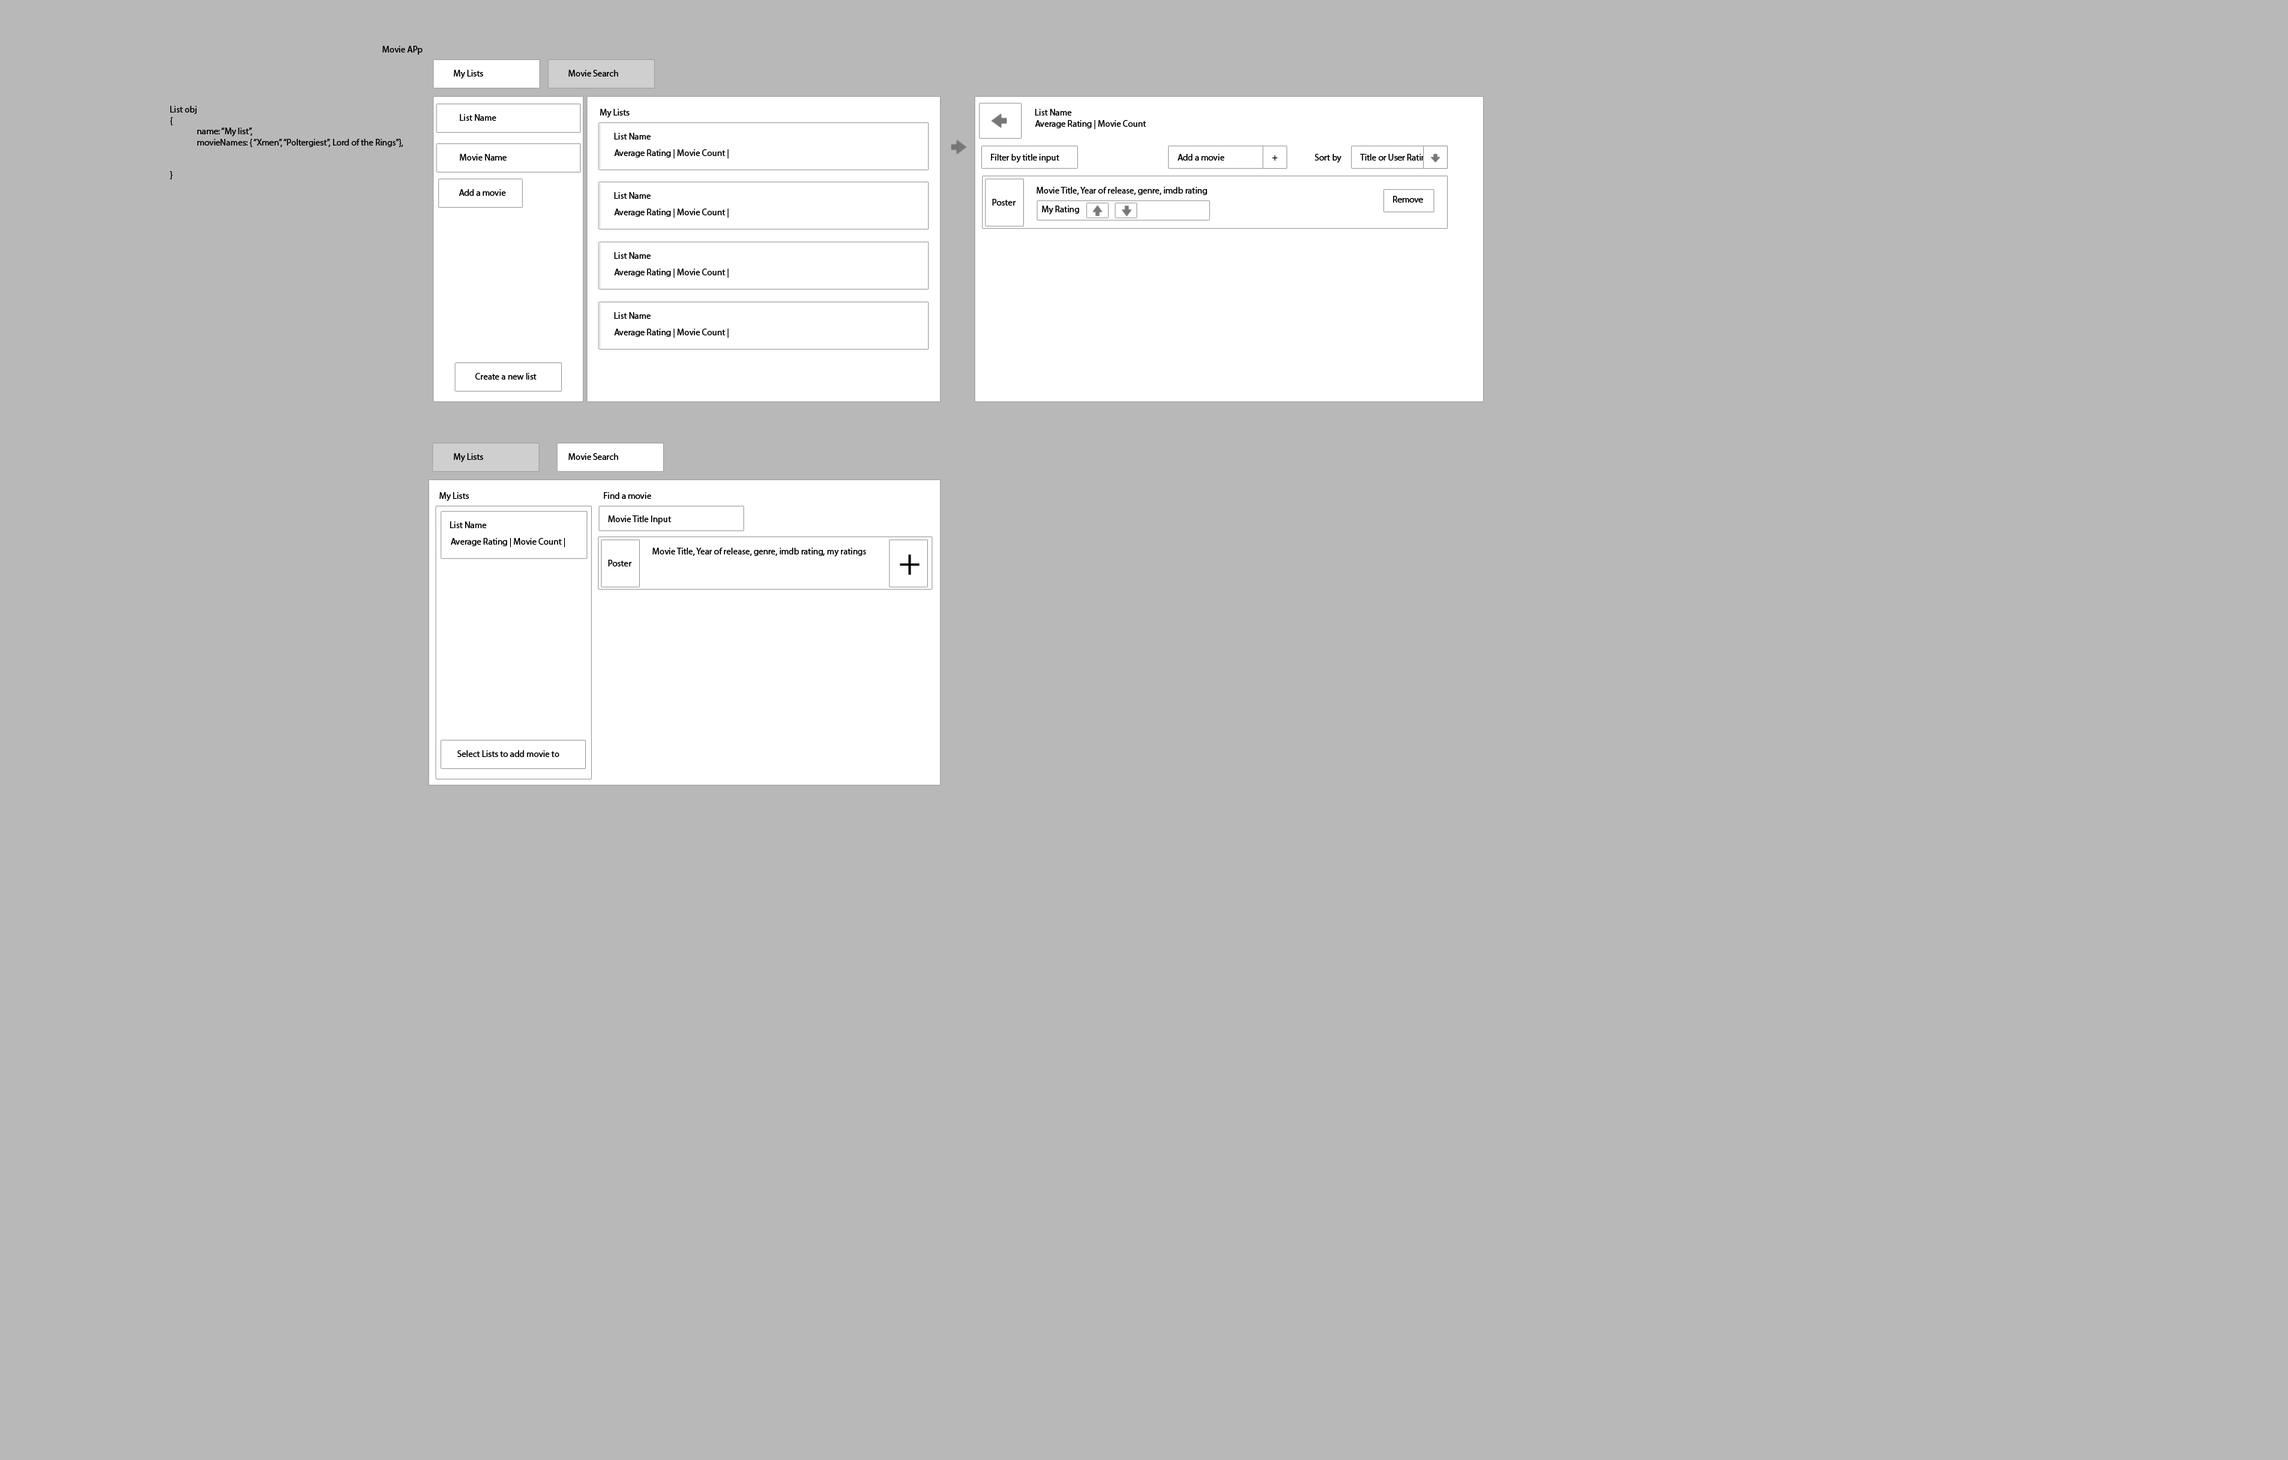
<style>
.page{position:relative;width:2288px;height:1460px;background:#b8b8b8}
.page>*{position:absolute;margin:0}
.t1{font:9px "MyriadPro-Regular";color:#000000}
.t2{font:37.2px "MyriadPro-Regular";color:#000000}
</style>
<div class="page">
<p class="t1" style="left:382px;top:46px;width:40px;height:9px">Movie APp</p>
<p class="t1" style="left:454px;top:70px;width:29px;height:9px">My Lists</p>
<p class="t1" style="left:568px;top:70px;width:50px;height:6px">Movie Search</p>
<p class="t1" style="left:170px;top:106px;width:233px;height:73px">List obj<br>{<br> name: “My list”,<br> movieNames: { “Xmen”, “Poltergiest”, Lord of the Rings”},<br><br><br>}</p>
<p class="t1" style="left:600px;top:109px;width:29px;height:9px">My Lists</p>
<p class="t1" style="left:1035px;top:109px;width:111px;height:21px">List Name<br>Average Rating | Movie Count</p>
<p class="t1" style="left:460px;top:114px;width:36px;height:7px">List Name</p>
<p class="t1" style="left:614px;top:133px;width:37px;height:7px">List Name</p>
<p class="t1" style="left:614px;top:149px;width:114px;height:10px">Average Rating | Movie Count |</p>
<p class="t1" style="left:460px;top:154px;width:47px;height:6px">Movie Name</p>
<p class="t1" style="left:991px;top:154px;width:68px;height:9px">Filter by title input</p>
<p class="t1" style="left:1178px;top:154px;width:46px;height:6px">Add a movie</p>
<p class="t1" style="left:1272px;top:155px;width:5px;height:5px">+</p>
<p class="t1" style="left:1314px;top:154px;width:27px;height:9px">Sort by</p>
<p class="t1" style="left:1360px;top:154px;width:71px;height:8px">Title or User Rating</p>
<p class="t1" style="left:459px;top:189px;width:47px;height:7px">Add a movie</p>
<p class="t1" style="left:614px;top:192px;width:37px;height:7px">List Name</p>
<p class="t1" style="left:1036px;top:187px;width:171px;height:8px">Movie Title, Year of release, genre, imdb rating</p>
<p class="t1" style="left:1393px;top:196px;width:30px;height:6px">Remove</p>
<p class="t1" style="left:614px;top:208px;width:114px;height:10px">Average Rating | Movie Count |</p>
<p class="t1" style="left:992px;top:199px;width:24px;height:7px">Poster</p>
<p class="t1" style="left:1042px;top:206px;width:37px;height:8px">My Rating</p>
<p class="t1" style="left:614px;top:252px;width:37px;height:7px">List Name</p>
<p class="t1" style="left:614px;top:268px;width:114px;height:10px">Average Rating | Movie Count |</p>
<p class="t1" style="left:614px;top:312px;width:37px;height:7px">List Name</p>
<p class="t1" style="left:614px;top:328px;width:114px;height:10px">Average Rating | Movie Count |</p>
<p class="t1" style="left:475px;top:373px;width:61px;height:7px">Create a new list</p>
<p class="t1" style="left:454px;top:453px;width:29px;height:9px">My Lists</p>
<p class="t1" style="left:568px;top:453px;width:50px;height:7px">Movie Search</p>
<p class="t1" style="left:440px;top:492px;width:29px;height:9px">My Lists</p>
<p class="t1" style="left:604px;top:492px;width:47px;height:7px">Find a movie</p>
<p class="t1" style="left:450px;top:521px;width:37px;height:7px">List Name</p>
<p class="t1" style="left:608px;top:515px;width:63px;height:9px">Movie Title Input</p>
<p class="t1" style="left:451px;top:538px;width:114px;height:10px">Average Rating | Movie Count |</p>
<p class="t1" style="left:652px;top:548px;width:214px;height:8px">Movie Title, Year of release, genre, imdb rating, my ratings</p>
<p class="t2" style="left:899px;top:554px;width:21px;height:20px">+</p>
<p class="t1" style="left:608px;top:560px;width:24px;height:6px">Poster</p>
<p class="t1" style="left:457px;top:750px;width:103px;height:7px">Select Lists to add movie to</p>
</div>
